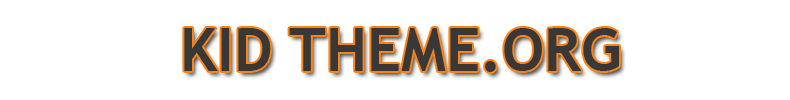
<style>
.page{position:relative;width:790px;height:100px;background:#ffffff}
.page>*{position:absolute;margin:0}
.t1{font:60px "TrebuchetMS-Bold";color:#383838}
</style>
<div class="page">
<p class="t1" style="left:184px;top:28px;width:435px;height:44px">KID THEME.ORG</p>
</div>
